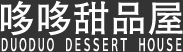
<style>
.page{position:relative;width:183px;height:52px;background:#333333}
.page>*{position:absolute;margin:0}
.t1{font:37.5px "AdobeHeitiStd-Regular";color:#ffffff}
.t2{font:16.7px "AdobeHeitiStd-Regular";color:#ffffff;scale:0.55 1}
</style>
<div class="page">
<p class="t1" style="left:0px;top:0px;width:183px;height:36px">哆哆甜品屋</p>
<p class="t2" style="left:1px;top:38px;width:181px;height:14px">ＤＵＯＤＵＯ　ＤＥＳＳＥＲＴ　ＨＯＵＳＥ</p>
</div>
